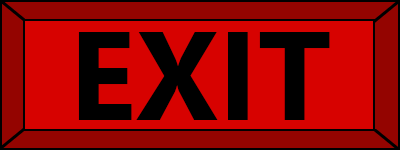
<style>
.page{position:relative;width:400px;height:150px;background:#d70200}
.page>*{position:absolute;margin:0}
.t1{font:125px "NirmalaUI-Bold";color:#000000}
</style>
<div class="page">
<p class="t1" style="left:78px;top:32px;width:252px;height:88px">EXIT</p>
</div>
